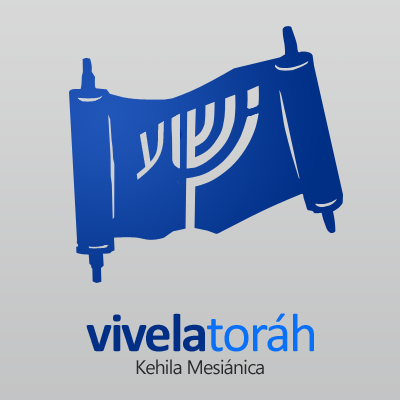
<style>
.page{position:relative;width:400px;height:400px}
.page>*{position:absolute;margin:0}
.t1{font:55px "Calibri-Bold";letter-spacing:-0.04em;color:#002f86}
.t2{font:55px "Calibri";letter-spacing:-0.04em;color:#0a70f8}
.t3{font:19.4px "SegoeUIHistoric";letter-spacing:-0.04em;color:#2b2b2b}
</style>
<div class="page">
<p class="t1" style="left:86px;top:313px;width:228px;height:39px">vivela<span class="t2">toráh</span></p>
<p class="t3" style="left:136px;top:359px;width:128px;height:16px">Kehila Mesiánica</p>
</div>
